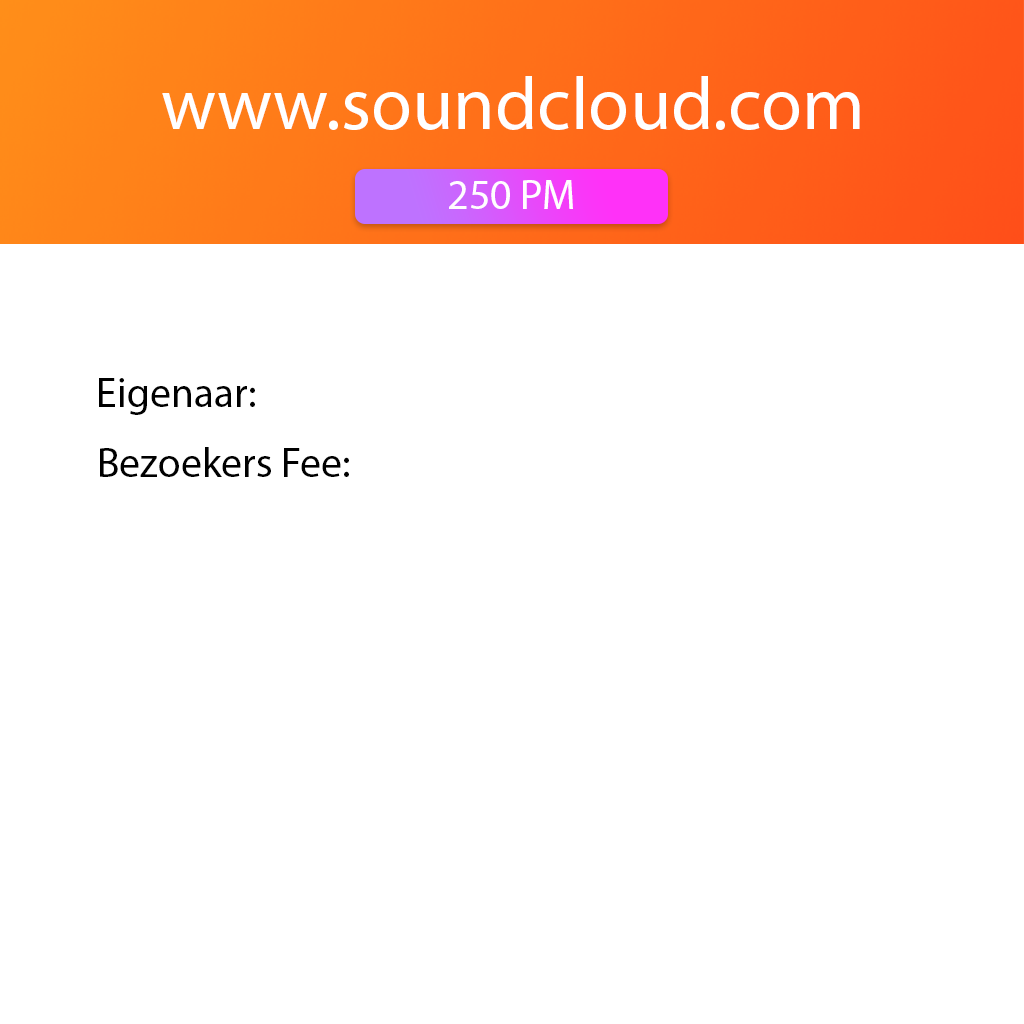
<style>
.page{position:relative;width:1024px;height:1024px;background:#ffffff}
.page>*{position:absolute;margin:0}
.t1{font:75px "MyriadPro-Regular";color:#ffffff}
.t2{font:41.7px "MyriadPro-Regular";color:#fffefe}
.t3{font:41.7px "MyriadPro-Regular";color:#000000}
</style>
<div class="page">
<p class="t1" style="left:162px;top:76px;width:698px;height:54px">www.soundcloud.com</p>
<p class="t2" style="left:449px;top:180px;width:124px;height:29px">250 PM</p>
<p class="t3" style="left:99px;top:378px;width:156px;height:37px">Eigenaar:</p>
<p class="t3" style="left:100px;top:447px;width:249px;height:30px">Bezoekers Fee:</p>
</div>
